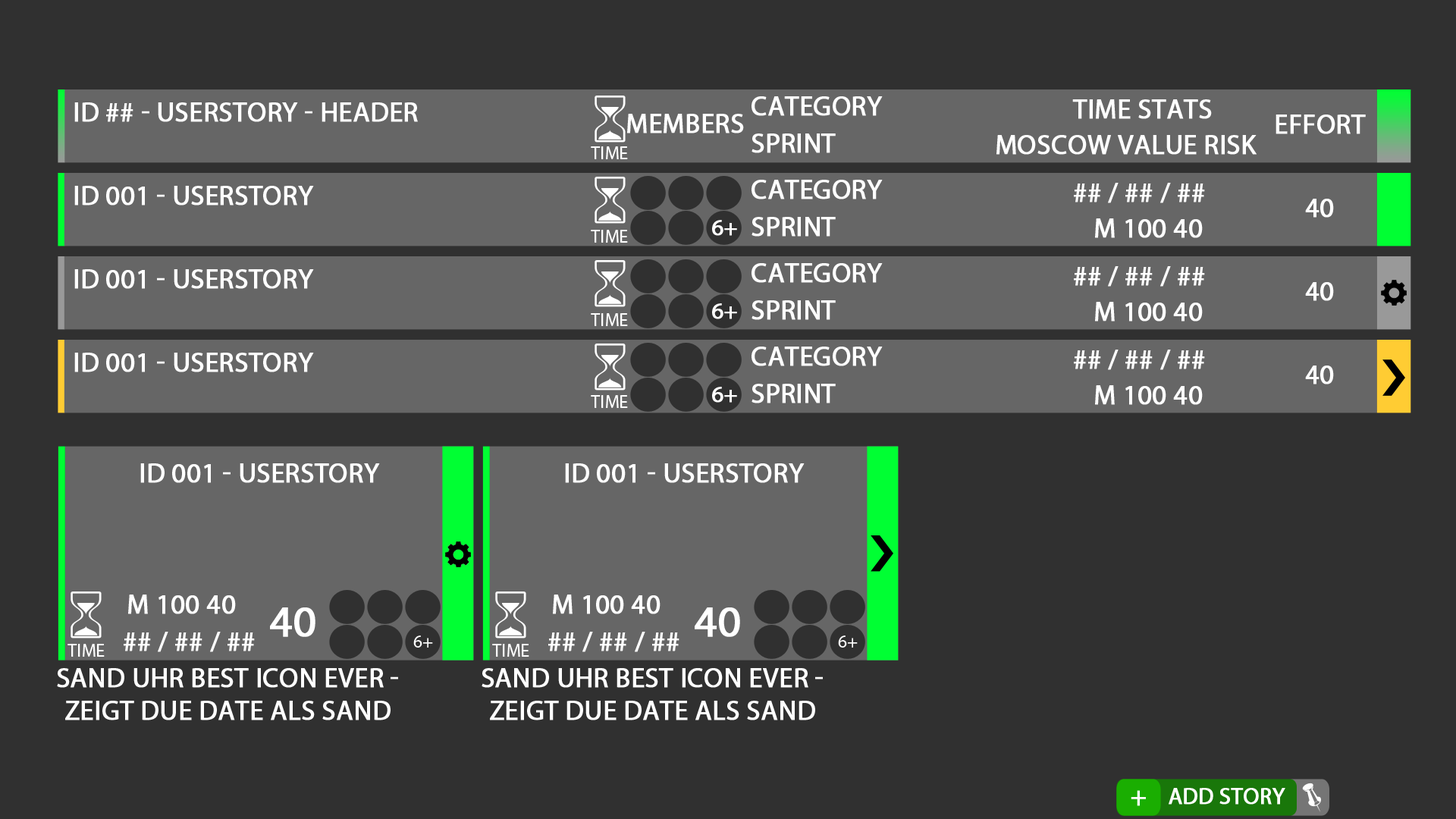
<style>
.page{position:relative;width:1456px;height:819px;background:#303030}
.page>*{position:absolute;margin:0}
.t1{font:27.3px "MyriadPro-Regular";color:#ffffff;text-transform:uppercase;font-weight:bold}
.t2{font:18.2px "MyriadPro-Regular";color:#ffffff;text-transform:uppercase}
.t3{font:22.7px "MyriadPro-Regular";color:#ffffff;text-transform:uppercase;font-weight:bold}
.t4{font:43.9px "MyriadPro-Regular";color:#ffffff;text-transform:uppercase;font-weight:bold}
.t5{font:27.3px/24.8px "MyriadPro-Regular";color:#ffffff;text-transform:uppercase;font-weight:bold}
</style>
<div class="page">
<p class="t1" style="left:751px;top:96px;width:132px;height:20px">Category</p>
<p class="t1" style="left:1072px;top:99px;width:140px;height:20px">Time stats</p>
<p class="t1" style="left:74px;top:102px;width:344px;height:20px">ID ## - USERStory - Header</p>
<p class="t1" style="left:627px;top:114px;width:117px;height:19px">Members</p>
<p class="t1" style="left:1275px;top:115px;width:91px;height:19px">effort</p>
<p class="t1" style="left:751px;top:133px;width:85px;height:20px">Sprint</p>
<p class="t1" style="left:996px;top:135px;width:261px;height:20px">Moscow value risk</p>
<p class="t2" style="left:591px;top:146px;width:37px;height:13px">time</p>
<p class="t1" style="left:74px;top:186px;width:240px;height:20px">ID 001 - USERStory</p>
<p class="t1" style="left:751px;top:180px;width:132px;height:19px">Category</p>
<p class="t1" style="left:1074px;top:183px;width:131px;height:20px">## / ## / ##</p>
<p class="t1" style="left:1305px;top:199px;width:29px;height:19px">40</p>
<p class="t3" style="left:712px;top:220px;width:25px;height:16px">6+</p>
<p class="t1" style="left:751px;top:217px;width:85px;height:20px">Sprint</p>
<p class="t1" style="left:1095px;top:218px;width:108px;height:20px">m 100 40</p>
<p class="t2" style="left:591px;top:230px;width:37px;height:13px">time</p>
<p class="t1" style="left:74px;top:269px;width:240px;height:20px">ID 001 - USERStory</p>
<p class="t1" style="left:751px;top:263px;width:132px;height:20px">Category</p>
<p class="t1" style="left:1074px;top:266px;width:131px;height:21px">## / ## / ##</p>
<p class="t1" style="left:1305px;top:282px;width:29px;height:19px">40</p>
<p class="t3" style="left:712px;top:303px;width:25px;height:16px">6+</p>
<p class="t1" style="left:751px;top:300px;width:85px;height:20px">Sprint</p>
<p class="t1" style="left:1095px;top:302px;width:108px;height:20px">m 100 40</p>
<p class="t2" style="left:591px;top:313px;width:37px;height:13px">time</p>
<p class="t1" style="left:74px;top:353px;width:240px;height:19px">ID 001 - USERStory</p>
<p class="t1" style="left:751px;top:347px;width:132px;height:19px">Category</p>
<p class="t1" style="left:1074px;top:350px;width:131px;height:20px">## / ## / ##</p>
<p class="t1" style="left:1305px;top:366px;width:29px;height:18px">40</p>
<p class="t3" style="left:712px;top:387px;width:25px;height:16px">6+</p>
<p class="t1" style="left:751px;top:384px;width:85px;height:19px">Sprint</p>
<p class="t1" style="left:1095px;top:385px;width:108px;height:20px">m 100 40</p>
<p class="t2" style="left:591px;top:395px;width:37px;height:13px">time</p>
<p class="t1" style="left:140px;top:463px;width:240px;height:20px">ID 001 - USERStory</p>
<p class="t1" style="left:565px;top:463px;width:240px;height:20px">ID 001 - USERStory</p>
<p class="t1" style="left:128px;top:595px;width:108px;height:19px">M 100 40</p>
<p class="t1" style="left:553px;top:595px;width:107px;height:19px">M 100 40</p>
<p class="t4" style="left:270px;top:607px;width:45px;height:30px">40</p>
<p class="t4" style="left:695px;top:607px;width:45px;height:30px">40</p>
<p class="t1" style="left:124px;top:632px;width:131px;height:20px">## / ## / ##</p>
<p class="t2" style="left:413px;top:635px;width:20px;height:13px">6+</p>
<p class="t1" style="left:548px;top:632px;width:131px;height:20px">## / ## / ##</p>
<p class="t2" style="left:838px;top:635px;width:20px;height:13px">6+</p>
<p class="t2" style="left:67px;top:644px;width:38px;height:13px">time</p>
<p class="t2" style="left:492px;top:644px;width:37px;height:13px">time</p>
<p class="t5" style="left:57px;top:668px;width:341px;height:52px;text-align:center">Sand uhr best icon ever -<br>zeigt due date als sand</p>
<p class="t5" style="left:482px;top:668px;width:341px;height:52px;text-align:center">Sand uhr best icon ever -<br>zeigt due date als sand</p>
<p class="t1" style="left:1131px;top:790px;width:15px;height:16px">+</p>
<p class="t3" style="left:1169px;top:788px;width:116px;height:17px">add Story</p>
</div>
